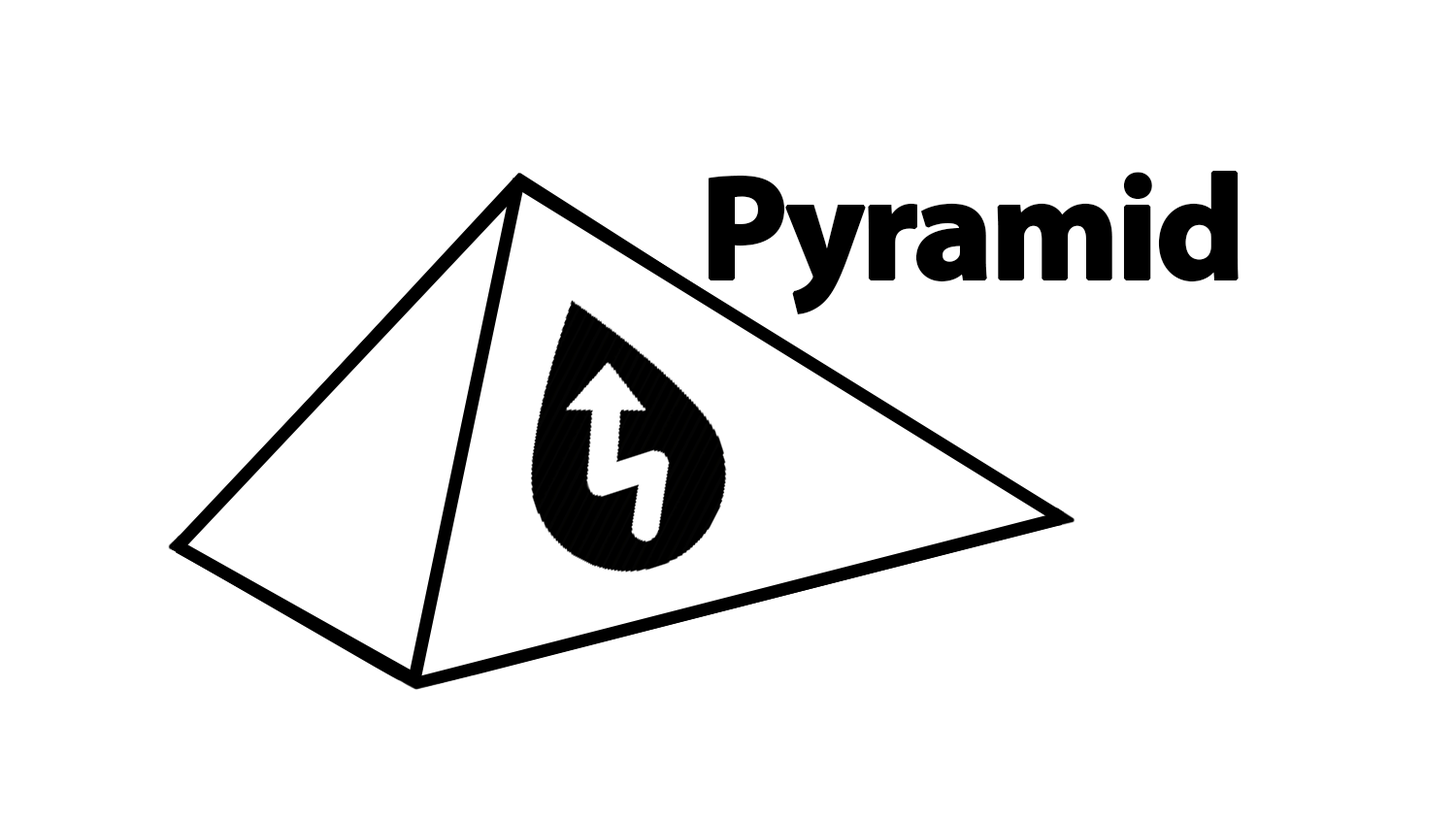
<style>
.page{position:relative;width:1456px;height:819px;background:#ffffff}
.page>*{position:absolute;margin:0}
.t1{font:148.5px "MyriadPro-Bold";letter-spacing:-0.04em;color:#000000;font-weight:bold}
</style>
<div class="page">
<p class="t1" style="left:708px;top:170px;width:530px;height:144px">Pyramid</p>
</div>
